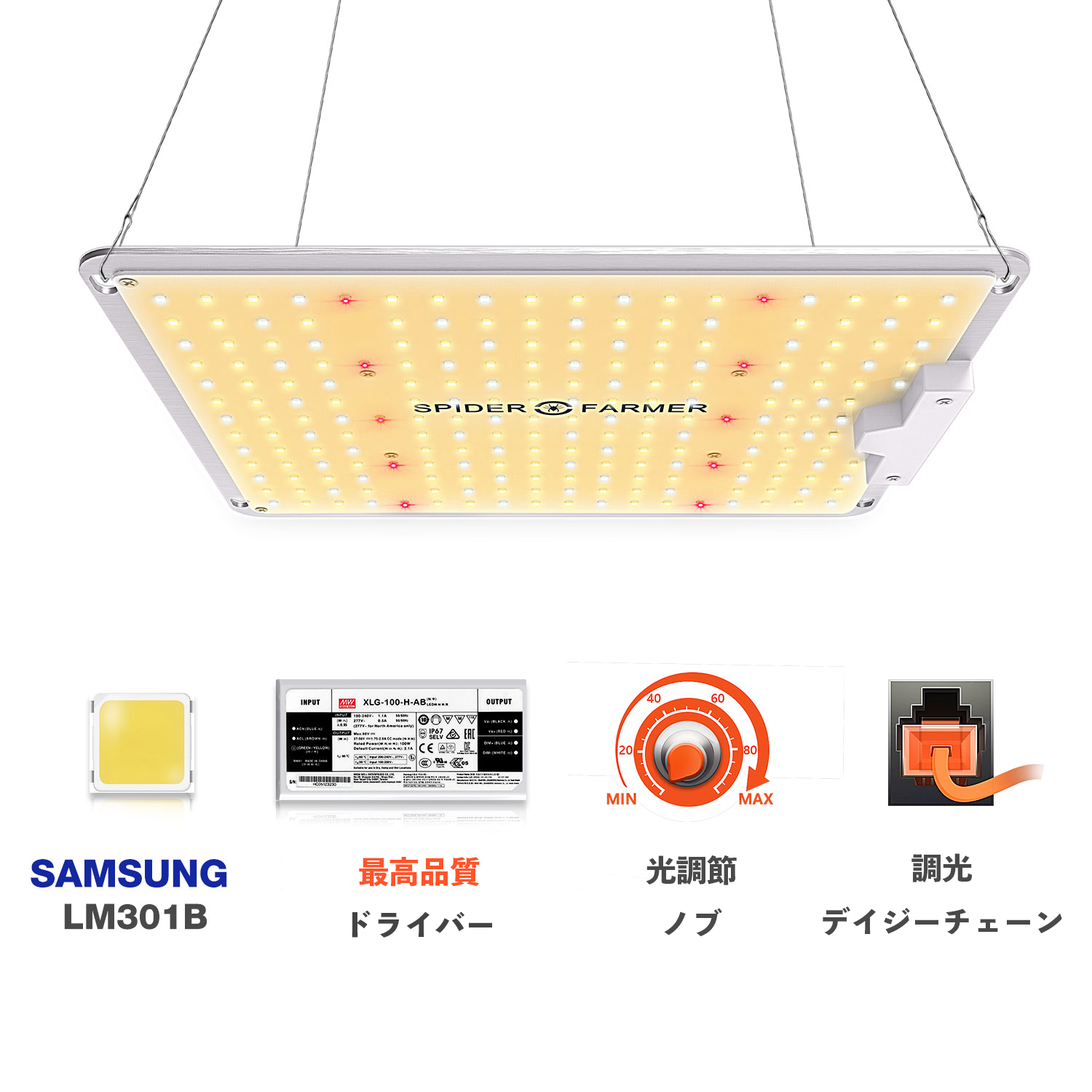
<style>
.page{position:relative;width:1092px;height:1092px;background:#ffffff}
.page>*{position:absolute;margin:0}
.t1{font:30.6px "ToppanBunkyuMidashiGothicStdN-ExtraBold";color:#434343}
.t2{font:30.6px "ToppanBunkyuMidashiGothicStdN-ExtraBold";color:#ff5429}
.t3{font:30.6px "ToppanBunkyuMidashiGothicStdN-ExtraBold";color:#494949}
</style>
<div class="page">
<p class="t1" style="left:352px;top:857px;width:140px;height:81px;text-align:center"><span class="t2">最高品質<br></span>ドライバー</p>
<p class="t3" style="left:646px;top:855px;width:91px;height:81px;text-align:center">光調節<br>ノブ</p>
<p class="t3" style="left:823px;top:853px;width:239px;height:82px;text-align:center">調光<br>デイジーチェーン</p>
</div>
